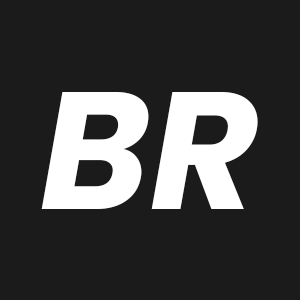
<style>
.page{position:relative;width:300px;height:300px;background:#1b1b1b}
.page>*{position:absolute;margin:0}
.t1{font:166.7px "Poppins-BoldItalic";color:#ffffff}
</style>
<div class="page">
<p class="t1" style="left:41px;top:92px;width:217px;height:117px">BR</p>
</div>
